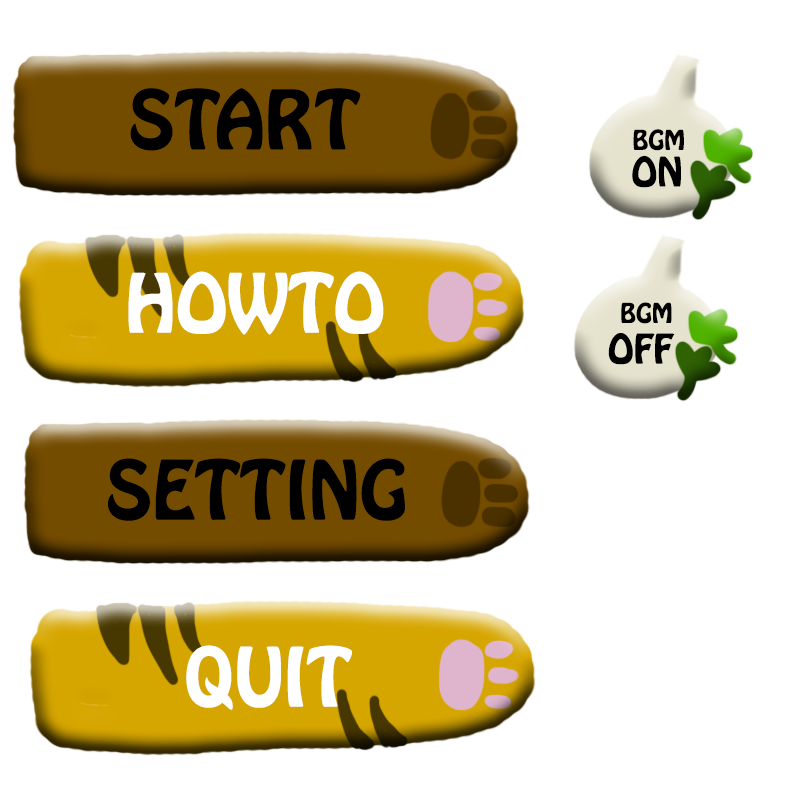
<style>
.page{position:relative;width:800px;height:800px;background:#ffffff}
.page>*{position:absolute;margin:0}
.t1{font:72px "HoboStd";color:#000000}
.t2{font:24px "HoboStd";color:#000000}
.t3{font:36px "HoboStd";color:#000000}
.t4{font:72px "HoboStd";color:#ffffff}
</style>
<div class="page">
<p class="t1" style="left:130px;top:88px;width:231px;height:63px">START</p>
<p class="t2" style="left:633px;top:129px;width:51px;height:22px">BGM</p>
<p class="t3" style="left:632px;top:155px;width:49px;height:33px">ON</p>
<p class="t4" style="left:128px;top:271px;width:256px;height:64px">HOWTO</p>
<p class="t2" style="left:621px;top:302px;width:51px;height:22px">BGM</p>
<p class="t3" style="left:608px;top:333px;width:67px;height:32px">OFF</p>
<p class="t1" style="left:108px;top:458px;width:297px;height:63px">SETTING</p>
<p class="t4" style="left:186px;top:645px;width:166px;height:65px">QUIT</p>
</div>
